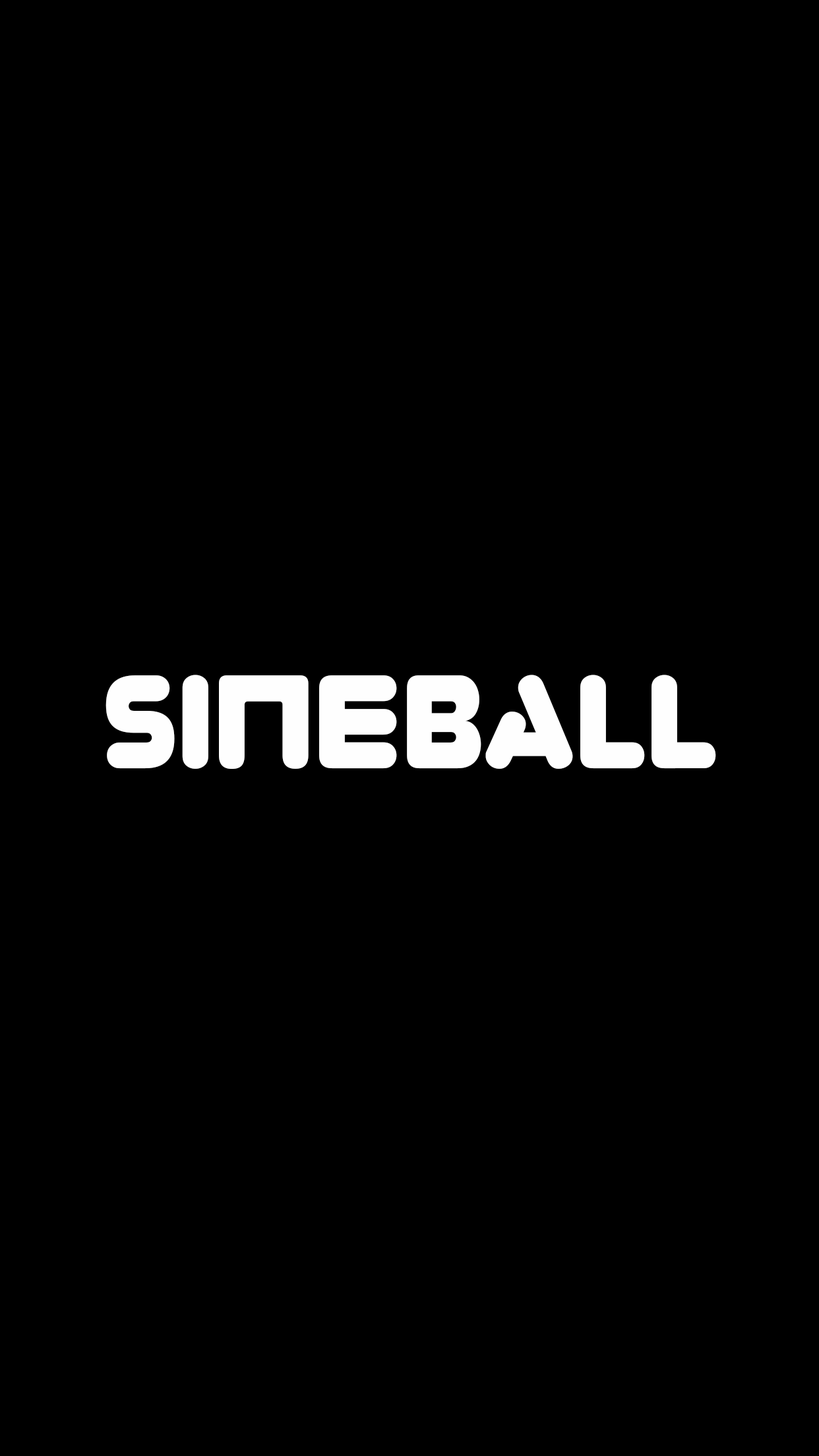
<style>
.page{position:relative;width:819px;height:1456px;background:#000000}
.page>*{position:absolute;margin:0}
.t1{font:131.8px "Zorque-Regular";color:#fefefe}
</style>
<div class="page">
<p class="t1" style="left:106px;top:675px;width:610px;height:94px">SINEBALL</p>
</div>
